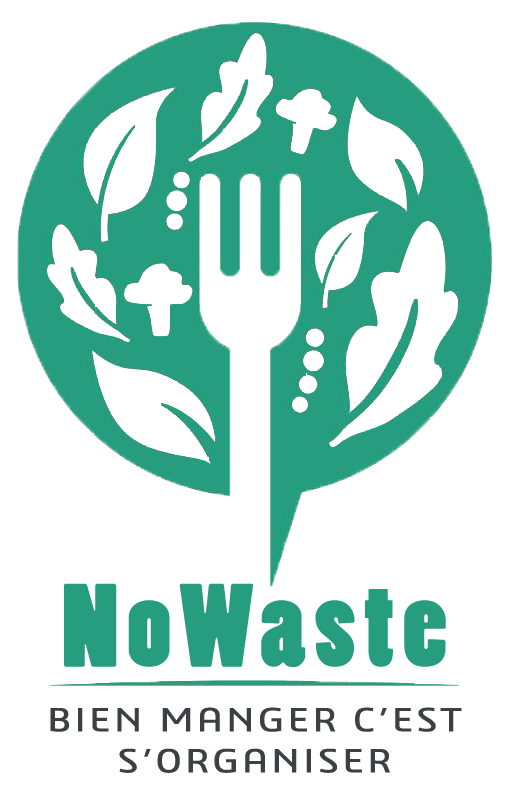
<style>
.page{position:relative;width:522px;height:799px;background:#ffffff}
.page>*{position:absolute;margin:0}
.t1{font:110.4px "PoplarStd";letter-spacing:0.075em;color:#269d7f;scale:1.07 1}
.t2{font:35px "3ds";letter-spacing:0.075em;color:#3b4143;scale:1.1 1}
</style>
<div class="page">
<p class="t1" style="left:64px;top:583px;width:382px;height:84px">NoWaste</p>
<p class="t2" style="left:50px;top:707px;width:412px;height:25px">BIEN MANGER C’EST</p>
<p class="t2" style="left:119px;top:748px;width:271px;height:25px">S’ORGANISER</p>
</div>
